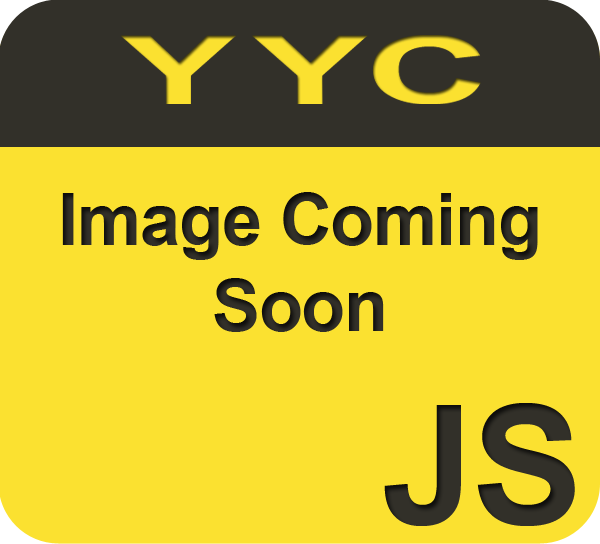
<style>
.page{position:relative;width:600px;height:544px;background:#fbe130}
.page>*{position:absolute;margin:0}
.t1{font:72px "Arial-BoldMT";letter-spacing:-0.015em;color:#323029}
.t2{font:165.6px "Arial-BoldMT";letter-spacing:-0.015em;color:#323029}
</style>
<div class="page">
<p class="t1" style="left:62px;top:192px;width:476px;height:140px;text-align:center">Image Coming<br>Soon</p>
<p class="t2" style="left:384px;top:403px;width:191px;height:123px">JS</p>
</div>
